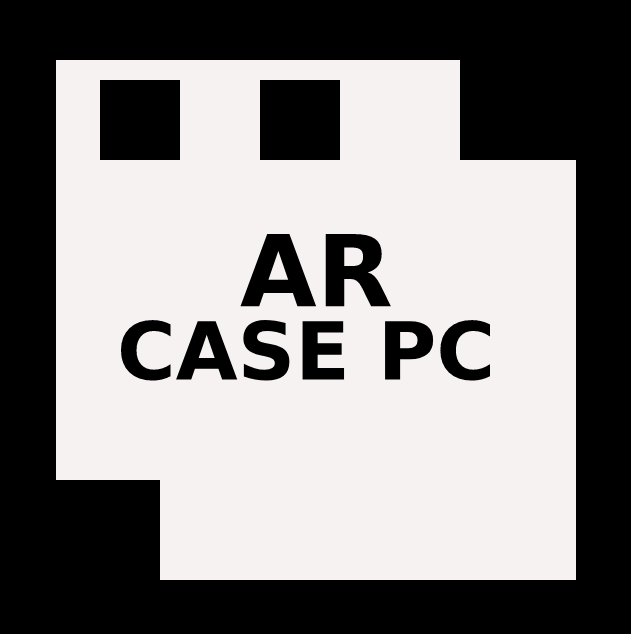
<style>
.page{position:relative;width:631px;height:634px;background:#f7f2f2}
.page>*{position:absolute;margin:0}
.t1{font:99px "DejaVuSans-Bold";color:#000000}
.t2{font:80px "DejaVuSans-Bold";color:#000000}
</style>
<div class="page">
<p class="t1" style="left:240px;top:234px;width:151px;height:73px">AR</p>
<p class="t2" style="left:120px;top:320px;width:370px;height:61px">CASE PC</p>
</div>
